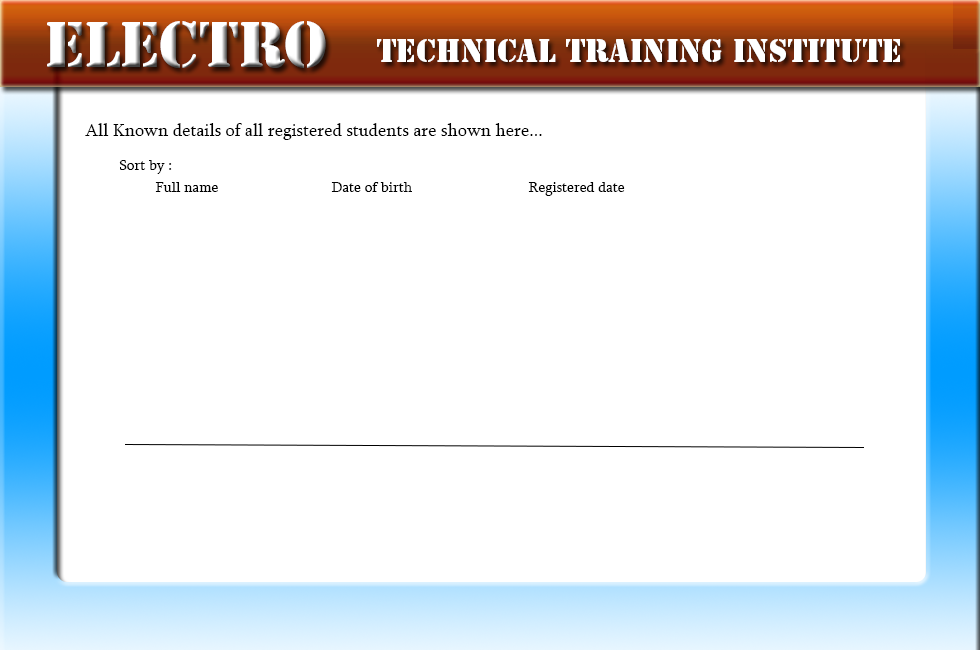
<style>
.page{position:relative;width:980px;height:650px;background:#ffffff}
.page>*{position:absolute;margin:0}
.t1{font:60px "StencilStd";color:#ffffff}
.t2{font:30px "StencilStd";color:#ffffff}
.t3{font:18px "Sylfaen";color:#000000}
.t4{font:15px "Sylfaen";color:#000000}
</style>
<div class="page">
<p class="t1" style="left:47px;top:21px;width:279px;height:47px">Electro</p>
<p class="t2" style="left:377px;top:39px;width:523px;height:23px">Technical Training Institute</p>
<p class="t3" style="left:85px;top:123px;width:457px;height:17px">All Known details of all registered students are shown here...</p>
<p class="t4" style="left:119px;top:160px;width:53px;height:14px">Sort by :</p>
<p class="t4" style="left:155px;top:182px;width:63px;height:10px">Full name</p>
<p class="t4" style="left:331px;top:182px;width:81px;height:10px">Date of birth</p>
<p class="t4" style="left:528px;top:182px;width:97px;height:14px">Registered date</p>
</div>
